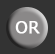
<style>
.page{position:relative;width:55px;height:54px;background:#333333}
.page>*{position:absolute;margin:0}
.t1{font:16px "Verdana";color:#ffffff;font-weight:bold}
</style>
<div class="page">
<p class="t1" style="left:15px;top:21px;width:25px;height:13px">OR</p>
</div>
